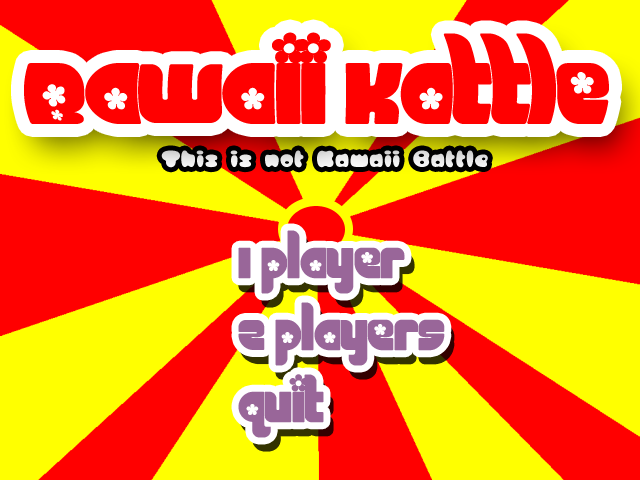
<style>
.page{position:relative;width:640px;height:480px;background:#ff0000}
.page>*{position:absolute;margin:0}
.t1{font:110px "Chick";color:#ff0000}
.t2{font:24px "ICHIGORegular";color:#eaeaea}
.t3{font:60px "Chick";color:#996699}
</style>
<div class="page">
<p class="t1" style="left:24px;top:32px;width:585px;height:92px">Bawaii Kattle</p>
<p class="t2" style="left:161px;top:150px;width:327px;height:18px">This is not Kawaii Battle</p>
<p class="t3" style="left:238px;top:230px;width:207px;height:208px">1 player<br>2 players<br>quit</p>
</div>
